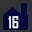
<style>
.page{position:relative;width:32px;height:32px;background:#333333}
.page>*{position:absolute;margin:0}
.t1{font:16px "AgencyFB-Bold";color:#ececec}
</style>
<div class="page">
<p class="t1" style="left:8px;top:16px;width:11px;height:13px">16</p>
</div>
